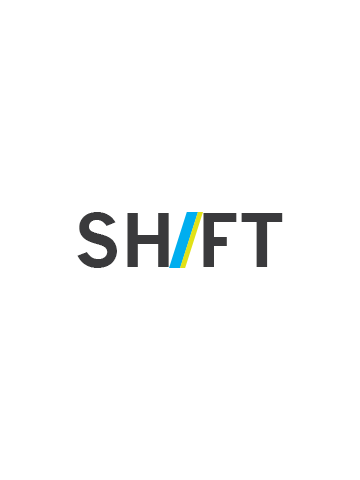
<style>
.page{position:relative;width:360px;height:480px;background:#ffffff}
.page>*{position:absolute;margin:0}
.t1{font:72px "NewsGothicMT-Bold";color:#3a3a3c}
</style>
<div class="page">
<p class="t1" style="left:77px;top:212px;width:206px;height:56px">SH FT</p>
</div>
